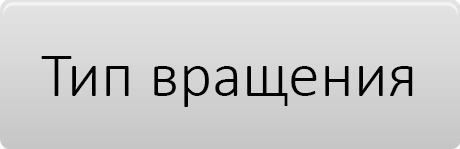
<style>
.page{position:relative;width:460px;height:149px}
.page>*{position:absolute;margin:0}
.t1{font:64px "Calibri-Light";color:#000000}
</style>
<div class="page">
<p class="t1" style="left:41px;top:56px;width:372px;height:51px">Тип вращения</p>
</div>
